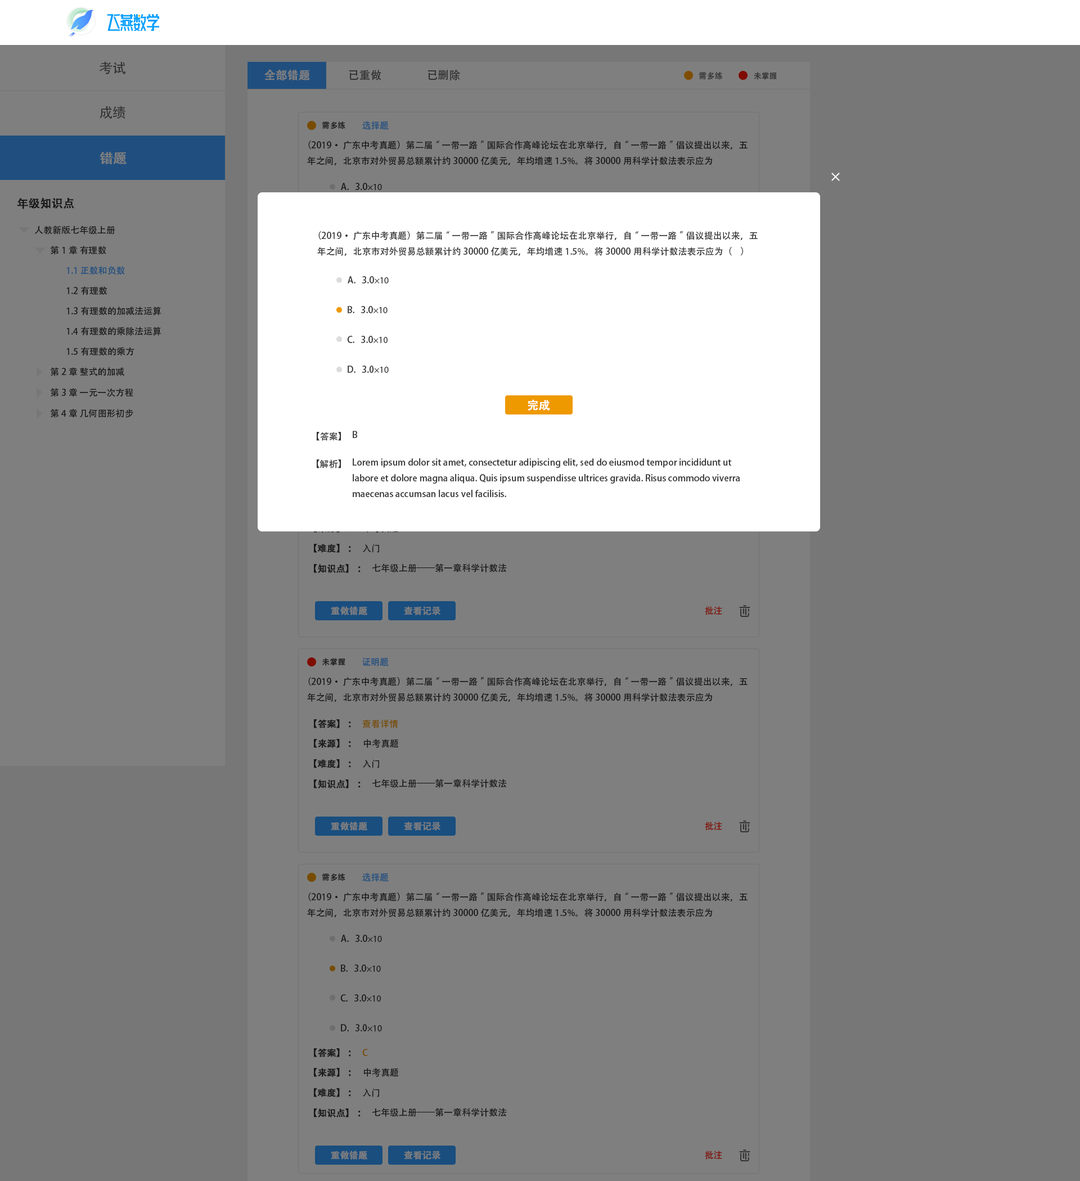
<style>
.page{position:relative;width:1080px;height:1181px;background:#7f7f7f}
.page>*{position:absolute;margin:0}
.t1{font:13.5px "AdobeHeitiStd-Regular";color:#333333}
.t2{font:11.2px "AdobeHeitiStd-Regular";color:#7f7f7f;font-weight:bold}
.t3{font:11.2px "AdobeHeitiStd-Regular";color:#333333}
.t4{font:7.9px "AdobeHeitiStd-Regular";color:#333333}
.t5{font:7.9px "AdobeHeitiStd-Regular";color:#191919}
.t6{font:9px "AdobeHeitiStd-Regular";color:#204f7f}
.t7{font:9px "AdobeHeitiStd-Regular";color:#191919}
.t8{font:13.5px "AdobeHeitiStd-Regular";color:#7f7f7f;font-weight:bold}
.t9{font:9px "MyriadPro-Regular";color:#191919}
.t10{font:11.2px "AdobeHeitiStd-Regular";color:#191919;font-weight:bold}
.t11{font:9px "AdobeHeitiStd-Regular";color:#333333}
.t12{font:9px "MyriadPro-Regular";color:#333333}
.t13{font:11.2px "AdobeHeitiStd-Regular";color:#ffffff;font-weight:bold}
.t14{font:9px "AdobeHeitiStd-Regular";color:#191919;font-weight:bold}
.t15{font:9px "AdobeHeitiStd-Regular";color:#7f7f7f;font-weight:bold}
.t16{font:9px "AdobeHeitiStd-Regular";color:#7f0c00}
.t17{font:9px "AdobeHeitiStd-Regular";color:#774c00}
</style>
<div class="page">
<p class="t1" style="left:99px;top:61px;width:27px;height:13px">考试</p>
<p class="t2" style="left:264px;top:69px;width:46px;height:12px">全部错题</p>
<p class="t3" style="left:349px;top:70px;width:32px;height:10px">已重做</p>
<p class="t3" style="left:428px;top:70px;width:32px;height:10px">已删除</p>
<p class="t4" style="left:699px;top:72px;width:24px;height:8px">需多练</p>
<p class="t4" style="left:754px;top:72px;width:23px;height:8px">未掌握</p>
<p class="t1" style="left:100px;top:106px;width:25px;height:13px">成绩</p>
<p class="t5" style="left:322px;top:122px;width:23px;height:7px">需多练</p>
<p class="t6" style="left:362px;top:121px;width:27px;height:9px">选择题</p>
<p class="t7" style="left:307px;top:141px;width:441px;height:24px">（2019·广东中考真题）第二届“一带一路”国际合作高峰论坛在北京举行，自“一带一路”倡议提出以来，五年之间，北京市对外贸易总额累计约30000亿美元，年均增速1.5%。将30000用科学计数法表示应为</p>
<p class="t8" style="left:100px;top:152px;width:27px;height:12px">错题</p>
<p class="t7" style="left:341px;top:183px;width:41px;height:7px">A.   3.0<span class="t9">×10</span></p>
<p class="t10" style="left:17px;top:197px;width:57px;height:12px">年级知识点</p>
<p class="t7" style="left:34px;top:226px;width:81px;height:9px">人教新版七年级上册</p>
<p class="t11" style="left:317px;top:231px;width:441px;height:25px">（2019·广东中考真题）第二届“一带一路”国际合作高峰论坛在北京举行，自“一带一路”倡议提出以来，五年之间，北京市对外贸易总额累计约30000亿美元，年均增速1.5%。将30000用科学计数法表示应为（    ）</p>
<p class="t7" style="left:50px;top:246px;width:56px;height:9px">第1章 有理数</p>
<p class="t6" style="left:66px;top:266px;width:59px;height:9px">1.1 正数和负数</p>
<p class="t11" style="left:348px;top:276px;width:41px;height:8px">A.   3.0<span class="t12">×10</span></p>
<p class="t7" style="left:66px;top:286px;width:41px;height:9px">1.2有理数</p>
<p class="t7" style="left:66px;top:307px;width:95px;height:9px">1.3有理数的加减法运算</p>
<p class="t11" style="left:348px;top:306px;width:40px;height:7px">B.   3.0<span class="t12">×10</span></p>
<p class="t7" style="left:66px;top:327px;width:95px;height:9px">1.4有理数的乘除法运算</p>
<p class="t11" style="left:347px;top:336px;width:41px;height:7px">C.   3.0<span class="t12">×10</span></p>
<p class="t7" style="left:66px;top:347px;width:68px;height:9px">1.5有理数的乘方</p>
<p class="t11" style="left:348px;top:366px;width:41px;height:7px">D.   3.0<span class="t12">×10</span></p>
<p class="t7" style="left:50px;top:367px;width:74px;height:9px">第2章 整式的加减</p>
<p class="t7" style="left:50px;top:388px;width:83px;height:9px">第3章 一元一次方程</p>
<p class="t13" style="left:528px;top:399px;width:22px;height:12px">完成</p>
<p class="t7" style="left:50px;top:409px;width:83px;height:9px">第4章 几何图形初步</p>
<p class="t11" style="left:317px;top:432px;width:24px;height:9px">【答案】</p>
<p class="t11" style="left:353px;top:431px;width:5px;height:7px">B</p>
<p class="t11" style="left:317px;top:460px;width:24px;height:9px">【解析】</p>
<p class="t11" style="left:353px;top:458px;width:387px;height:39px">Lorem ipsum dolor sit amet, consectetur adipiscing elit, sed do eiusmod tempor incididunt ut labore et dolore magna aliqua. Quis ipsum suspendisse ultrices gravida. Risus commodo viverra maecenas accumsan lacus vel facilisis.</p>
<p class="t14" style="left:314px;top:544px;width:37px;height:9px">【难度】：</p>
<p class="t7" style="left:363px;top:544px;width:16px;height:9px">入门</p>
<p class="t14" style="left:314px;top:564px;width:47px;height:9px">【知识点】：</p>
<p class="t7" style="left:372px;top:564px;width:135px;height:9px">七年级上册——第一章科学计数法</p>
<p class="t15" style="left:331px;top:606px;width:37px;height:9px">重做错题</p>
<p class="t15" style="left:404px;top:606px;width:36px;height:9px">查看记录</p>
<p class="t16" style="left:705px;top:606px;width:17px;height:9px">批注</p>
<p class="t5" style="left:322px;top:658px;width:23px;height:8px">未掌握</p>
<p class="t6" style="left:362px;top:658px;width:27px;height:9px">证明题</p>
<p class="t7" style="left:307px;top:677px;width:441px;height:25px">（2019·广东中考真题）第二届“一带一路”国际合作高峰论坛在北京举行，自“一带一路”倡议提出以来，五年之间，北京市对外贸易总额累计约30000亿美元，年均增速1.5%。将30000用科学计数法表示应为</p>
<p class="t14" style="left:314px;top:719px;width:37px;height:9px">【答案】：</p>
<p class="t17" style="left:362px;top:719px;width:36px;height:9px">查看详情</p>
<p class="t14" style="left:314px;top:739px;width:37px;height:9px">【来源】：</p>
<p class="t7" style="left:363px;top:739px;width:35px;height:9px">中考真题</p>
<p class="t14" style="left:314px;top:759px;width:37px;height:9px">【难度】：</p>
<p class="t7" style="left:363px;top:760px;width:16px;height:8px">入门</p>
<p class="t14" style="left:314px;top:780px;width:47px;height:9px">【知识点】：</p>
<p class="t7" style="left:372px;top:779px;width:135px;height:9px">七年级上册——第一章科学计数法</p>
<p class="t15" style="left:331px;top:822px;width:37px;height:9px">重做错题</p>
<p class="t15" style="left:404px;top:822px;width:36px;height:9px">查看记录</p>
<p class="t16" style="left:705px;top:822px;width:17px;height:9px">批注</p>
<p class="t5" style="left:322px;top:874px;width:23px;height:7px">需多练</p>
<p class="t6" style="left:362px;top:873px;width:27px;height:9px">选择题</p>
<p class="t7" style="left:307px;top:893px;width:441px;height:24px">（2019·广东中考真题）第二届“一带一路”国际合作高峰论坛在北京举行，自“一带一路”倡议提出以来，五年之间，北京市对外贸易总额累计约30000亿美元，年均增速1.5%。将30000用科学计数法表示应为</p>
<p class="t7" style="left:341px;top:935px;width:41px;height:7px">A.   3.0<span class="t9">×10</span></p>
<p class="t7" style="left:341px;top:965px;width:40px;height:7px">B.   3.0<span class="t9">×10</span></p>
<p class="t7" style="left:340px;top:994px;width:41px;height:8px">C.   3.0<span class="t9">×10</span></p>
<p class="t7" style="left:341px;top:1024px;width:41px;height:8px">D.   3.0<span class="t9">×10</span></p>
<p class="t14" style="left:314px;top:1048px;width:37px;height:10px">【答案】：</p>
<p class="t17" style="left:362px;top:1049px;width:6px;height:7px">C</p>
<p class="t14" style="left:314px;top:1068px;width:37px;height:9px">【来源】：</p>
<p class="t7" style="left:363px;top:1068px;width:35px;height:9px">中考真题</p>
<p class="t14" style="left:314px;top:1088px;width:37px;height:9px">【难度】：</p>
<p class="t7" style="left:363px;top:1089px;width:16px;height:8px">入门</p>
<p class="t14" style="left:314px;top:1109px;width:47px;height:9px">【知识点】：</p>
<p class="t7" style="left:372px;top:1108px;width:135px;height:9px">七年级上册——第一章科学计数法</p>
<p class="t15" style="left:331px;top:1151px;width:37px;height:9px">重做错题</p>
<p class="t15" style="left:404px;top:1151px;width:36px;height:9px">查看记录</p>
<p class="t16" style="left:705px;top:1151px;width:17px;height:9px">批注</p>
</div>
